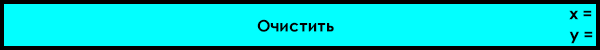
<style>
.page{position:relative;width:600px;height:50px;background:#02ffff}
.page>*{position:absolute;margin:0}
.t1{font:16px "CenturyGothic-Bold";color:#000000}
</style>
<div class="page">
<p class="t1" style="left:569px;top:10px;width:23px;height:10px">x =</p>
<p class="t1" style="left:257px;top:19px;width:77px;height:13px">Очистить</p>
<p class="t1" style="left:569px;top:31px;width:24px;height:13px">y =</p>
</div>
